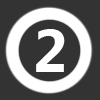
<style>
.page{position:relative;width:100px;height:100px;background:#333333}
.page>*{position:absolute;margin:0}
.t1{font:60px "SegoeUI-Bold";letter-spacing:-0.105em;color:#ffffff}
</style>
<div class="page">
<p class="t1" style="left:36px;top:29px;width:29px;height:43px">2</p>
</div>
